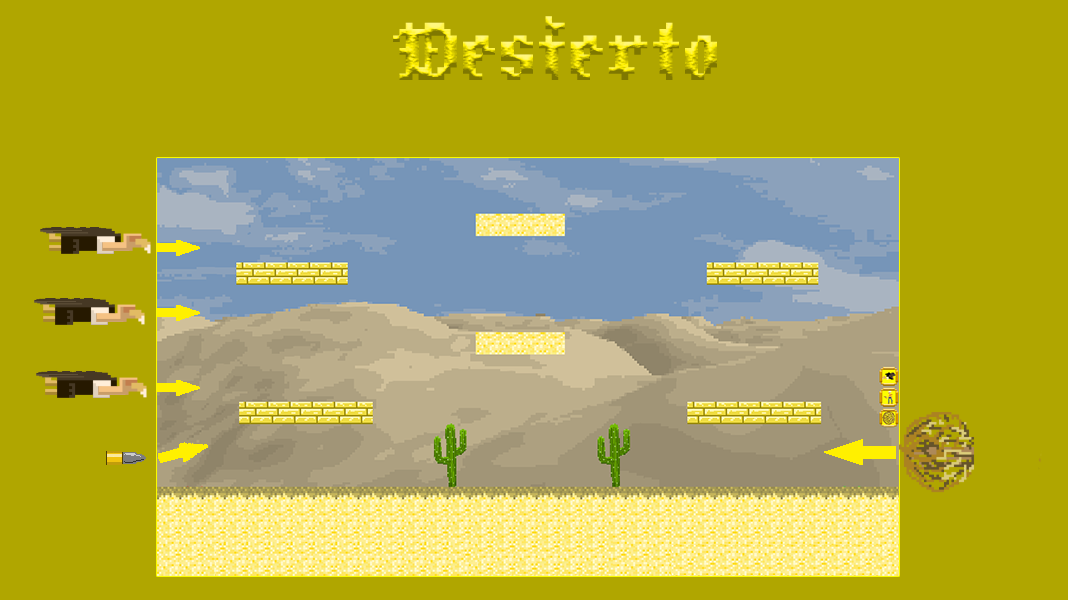
<style>
.page{position:relative;width:1068px;height:600px;background:#b0a600}
.page>*{position:absolute;margin:0}
.t1{font:101.5px "OwreKynge"}
</style>
<div class="page">
<p class="t1" style="left:393px;top:16px;width:324px;height:64px">Desierto</p>
</div>
